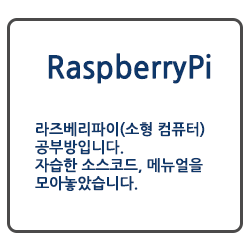
<style>
.page{position:relative;width:250px;height:250px;background:#ffffff}
.page>*{position:absolute;margin:0}
.t1{font:31px "NanumGothicBold";color:#0e3769}
.t2{font:15px "NanumGothicBold";color:#0e3769}
</style>
<div class="page">
<p class="t1" style="left:48px;top:53px;width:163px;height:31px">RaspberryPi</p>
<p class="t2" style="left:35px;top:122px;width:170px;height:69px">라즈베리파이(소형 컴퓨터)<br>공부방입니다.<br>자습한 소스코드, 메뉴얼을<br>모아놓았습니다.</p>
</div>
